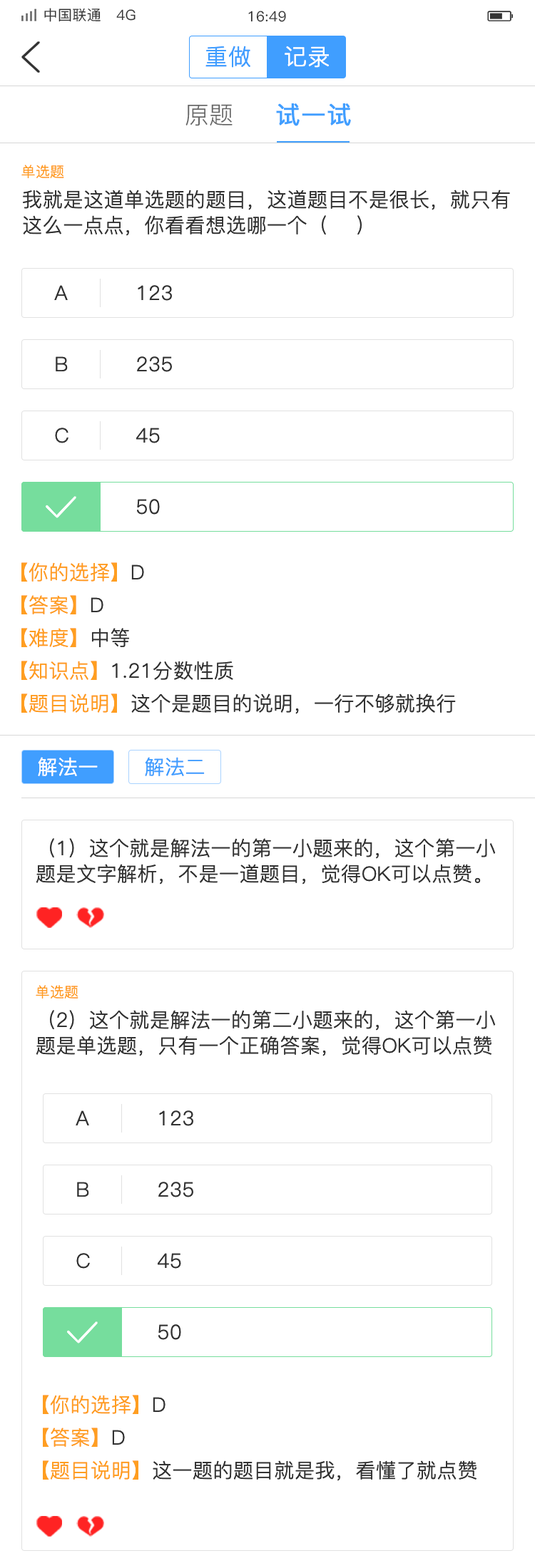
<style>
.page{position:relative;width:535px;height:1568px;background:#ffffff}
.page>*{position:absolute;margin:0}
.t1{font:14.3px "PingFang-SC-Medium";letter-spacing:0.02em;color:#333333}
.t2{font:22.8px "PingFang-SC-Regular";letter-spacing:0.02em;color:#409eff}
.t3{font:22.8px "PingFang-SC-Regular";letter-spacing:0.02em;color:#ffffff}
.t4{font:24.2px "PingFang-SC-Regular";color:#666666}
.t5{font:24.2px "PingFang-SC-Medium";letter-spacing:0.02em;color:#409eff;font-weight:bold}
.t6{font:14.3px "PingFang-SC-Regular";letter-spacing:0.02em;color:#ff9e21}
.t7{font:20px/25.7px "PingFang-SC-Regular";letter-spacing:0.02em;color:#333333}
.t8{font:20px "PingFang-SC-Regular";letter-spacing:0.02em;color:#333333}
.t9{font:20px "PingFang-SC-Regular";letter-spacing:0.02em;color:#ff9e21}
.t10{font:20px "PingFang-SC-Regular";letter-spacing:0.02em;color:#ffffff}
.t11{font:20px "PingFang-SC-Regular";letter-spacing:0.02em;color:#409eff}
</style>
<div class="page">
<p class="t1" style="left:44px;top:8px;width:91px;height:14px">中国联通   4G</p>
<p class="t1" style="left:248px;top:11px;width:38px;height:11px">16:49</p>
<p class="t2" style="left:205px;top:46px;width:45px;height:22px">重做</p>
<p class="t3" style="left:284px;top:46px;width:45px;height:22px">记录</p>
<p class="t4" style="left:185px;top:104px;width:47px;height:22px">原题</p>
<p class="t5" style="left:276px;top:103px;width:75px;height:23px">试一试</p>
<p class="t6" style="left:21px;top:165px;width:43px;height:13px">单选题</p>
<p class="t7" style="left:23px;top:190px;width:487px;height:46px">我就是这道单选题的题目，这道题目不是很长，就只有这么一点点，你看看想选哪一个（    ）</p>
<p class="t8" style="left:54px;top:285px;width:14px;height:15px">A</p>
<p class="t8" style="left:138px;top:285px;width:34px;height:16px">123</p>
<p class="t8" style="left:56px;top:356px;width:12px;height:15px">B</p>
<p class="t8" style="left:137px;top:356px;width:35px;height:16px">235</p>
<p class="t8" style="left:55px;top:428px;width:13px;height:15px">C</p>
<p class="t8" style="left:136px;top:428px;width:24px;height:15px">45</p>
<p class="t8" style="left:137px;top:499px;width:23px;height:16px">50</p>
<p class="t9" style="left:21px;top:562px;width:123px;height:20px">【你的选择】<span class="t8">D</span></p>
<p class="t9" style="left:21px;top:595px;width:82px;height:19px">【答案】<span class="t8">D</span></p>
<p class="t9" style="left:21px;top:628px;width:108px;height:19px">【难度】<span class="t8">中等</span></p>
<p class="t8" style="left:21px;top:661px;width:212px;height:19px"><span class="t9">【知识点】</span>1.21分数性质</p>
<p class="t8" style="left:21px;top:693px;width:434px;height:21px"><span class="t9">【题目说明】</span>这个是题目的说明，一行不够就换行</p>
<p class="t10" style="left:38px;top:757px;width:60px;height:19px">解法一</p>
<p class="t11" style="left:145px;top:757px;width:60px;height:19px">解法二</p>
<p class="t7" style="left:36px;top:838px;width:459px;height:46px">（1）这个就是解法一的第一小题来的，这个第一小题是文字解析，不是一道题目，觉得OK可以点赞。</p>
<p class="t6" style="left:36px;top:985px;width:42px;height:14px">单选题</p>
<p class="t7" style="left:36px;top:1010px;width:459px;height:46px">（2）这个就是解法一的第二小题来的，这个第一小题是单选题，只有一个正确答案，觉得OK可以点赞。</p>
<p class="t8" style="left:76px;top:1110px;width:13px;height:15px">A</p>
<p class="t8" style="left:159px;top:1110px;width:34px;height:16px">123</p>
<p class="t8" style="left:77px;top:1182px;width:12px;height:15px">B</p>
<p class="t8" style="left:158px;top:1182px;width:35px;height:15px">235</p>
<p class="t8" style="left:76px;top:1253px;width:14px;height:16px">C</p>
<p class="t8" style="left:158px;top:1253px;width:23px;height:16px">45</p>
<p class="t8" style="left:158px;top:1324px;width:23px;height:16px">50</p>
<p class="t9" style="left:43px;top:1395px;width:122px;height:19px">【你的选择】<span class="t8">D</span></p>
<p class="t9" style="left:43px;top:1428px;width:82px;height:19px">【答案】<span class="t8">D</span></p>
<p class="t8" style="left:43px;top:1460px;width:433px;height:21px"><span class="t9">【题目说明】</span>这一题的题目就是我，看懂了就点赞</p>
</div>
